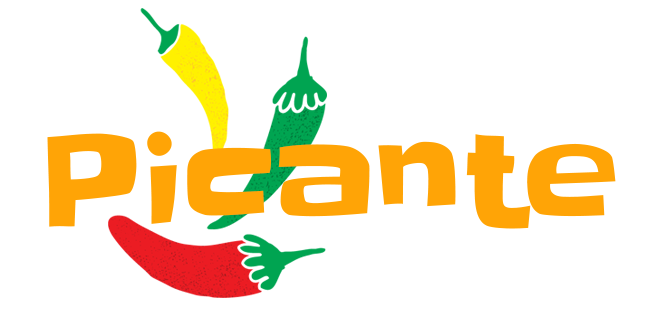
<style>
.page{position:relative;width:650px;height:328px;background:#ffffff}
.page>*{position:absolute;margin:0}
.t1{font:128.7px "Slackey-Regular";color:#ffa406}
</style>
<div class="page">
<p class="t1" style="left:47px;top:131px;width:569px;height:98px">Picante</p>
</div>
